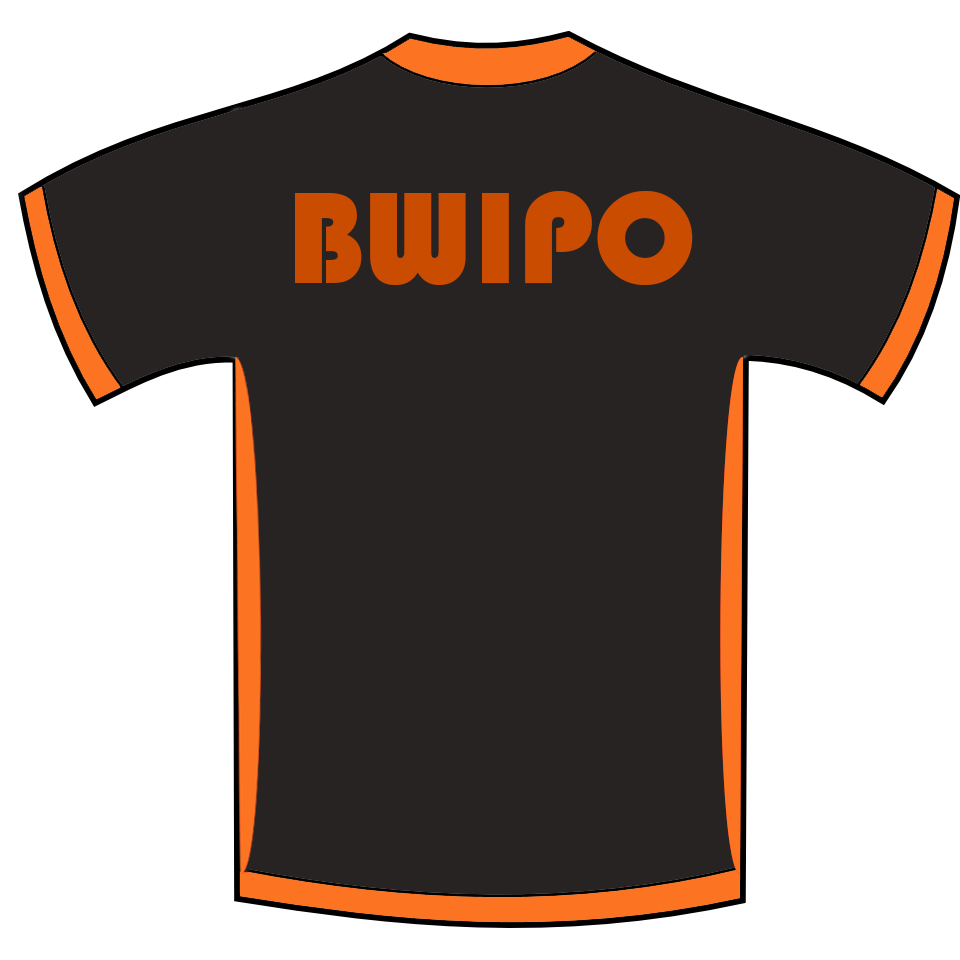
<style>
.page{position:relative;width:960px;height:960px;background:#272323}
.page>*{position:absolute;margin:0}
.t1{font:135.4px "Bauhaus93";color:#ca4c00}
</style>
<div class="page">
<p class="t1" style="left:295px;top:191px;width:398px;height:94px">BWIPO</p>
</div>
